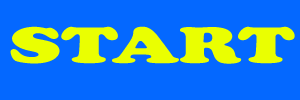
<style>
.page{position:relative;width:300px;height:100px;background:#0468ff}
.page>*{position:absolute;margin:0}
.t1{font:50.4px "CooperBlackStd";color:#eaff01;scale:1.53 1}
</style>
<div class="page">
<p class="t1" style="left:10px;top:26px;width:285px;height:38px">START</p>
</div>
